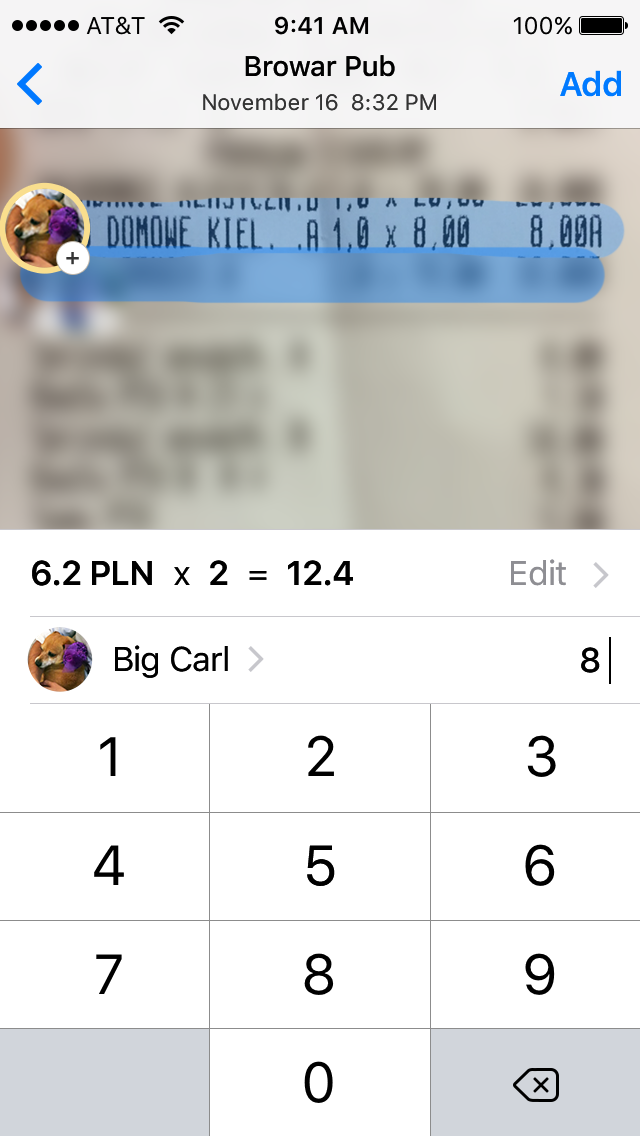
<style>
.page{position:relative;width:640px;height:1136px;background:#ffffff}
.page>*{position:absolute;margin:0}
.t1{font:28px "SFUIText-Medium";letter-spacing:-0.01em;color:#000000}
.t2{font:34px "SFUIText-Semibold";letter-spacing:-0.025em;color:#007aff}
.t3{font:22px "SFUIText-Regular";color:#333333}
.t4{font:24px "SFUIText-Medium";letter-spacing:-0.01em;color:#343434}
.t5{font:34px "SFUIText-Semibold";letter-spacing:-0.025em;color:#000000}
.t6{font:34px "SFUIText-Regular";letter-spacing:-0.025em;color:#000000}
.t7{font:34px "SFUIText-Regular";letter-spacing:-0.025em;color:#8e8e93}
.t8{font:34px "SFUIText-Regular";letter-spacing:-0.03em;color:#000000}
.t9{font:34px "SFUIText-Medium";letter-spacing:-0.025em;color:#000000}
.t10{font:55px "SFUIText-Regular";color:#000000}
.t11{font:56px "SFUIText-Regular";color:#000000}
</style>
<div class="page">
<p class="t1" style="left:245px;top:55px;width:150px;height:22px">Browar Pub</p>
<p class="t2" style="left:560px;top:70px;width:61px;height:27px">Add</p>
<p class="t3" style="left:203px;top:93px;width:233px;height:18px">November 16  8:32 PM</p>
<p class="t4" style="left:66px;top:252px;width:13px;height:13px">+</p>
<p class="t5" style="left:32px;top:560px;width:321px;height:26px">6.2 PLN<span class="t6">  x  </span>2<span class="t6">  =  </span>12.4</p>
<p class="t7" style="left:511px;top:559px;width:55px;height:27px">Edit</p>
<p class="t8" style="left:115px;top:645px;width:113px;height:33px">Big Carl</p>
<p class="t9" style="left:581px;top:647px;width:19px;height:26px">8</p>
<p class="t10" style="left:100px;top:737px;width:16px;height:39px">1</p>
<p class="t11" style="left:308px;top:735px;width:26px;height:41px">2</p>
<p class="t11" style="left:527px;top:735px;width:29px;height:42px">3</p>
<p class="t11" style="left:94px;top:845px;width:30px;height:40px">4</p>
<p class="t11" style="left:307px;top:845px;width:28px;height:41px">5</p>
<p class="t11" style="left:525px;top:844px;width:30px;height:42px">6</p>
<p class="t11" style="left:304px;top:953px;width:30px;height:42px">8</p>
<p class="t11" style="left:525px;top:953px;width:30px;height:42px">9</p>
<p class="t11" style="left:96px;top:954px;width:26px;height:40px">7</p>
<p class="t11" style="left:304px;top:1061px;width:29px;height:42px">0</p>
</div>
